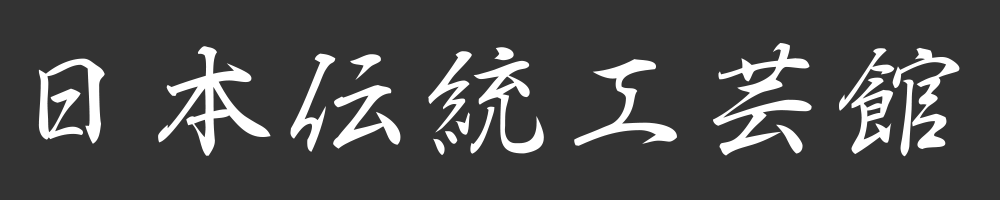
<style>
.page{position:relative;width:1000px;height:200px;background:#333333}
.page>*{position:absolute;margin:0}
.t1{font:125.2px "Gyoshokk-R";letter-spacing:0.1em;color:#ffffff}
</style>
<div class="page">
<p class="t1" style="left:38px;top:42px;width:922px;height:115px">日本伝統工芸館</p>
</div>
